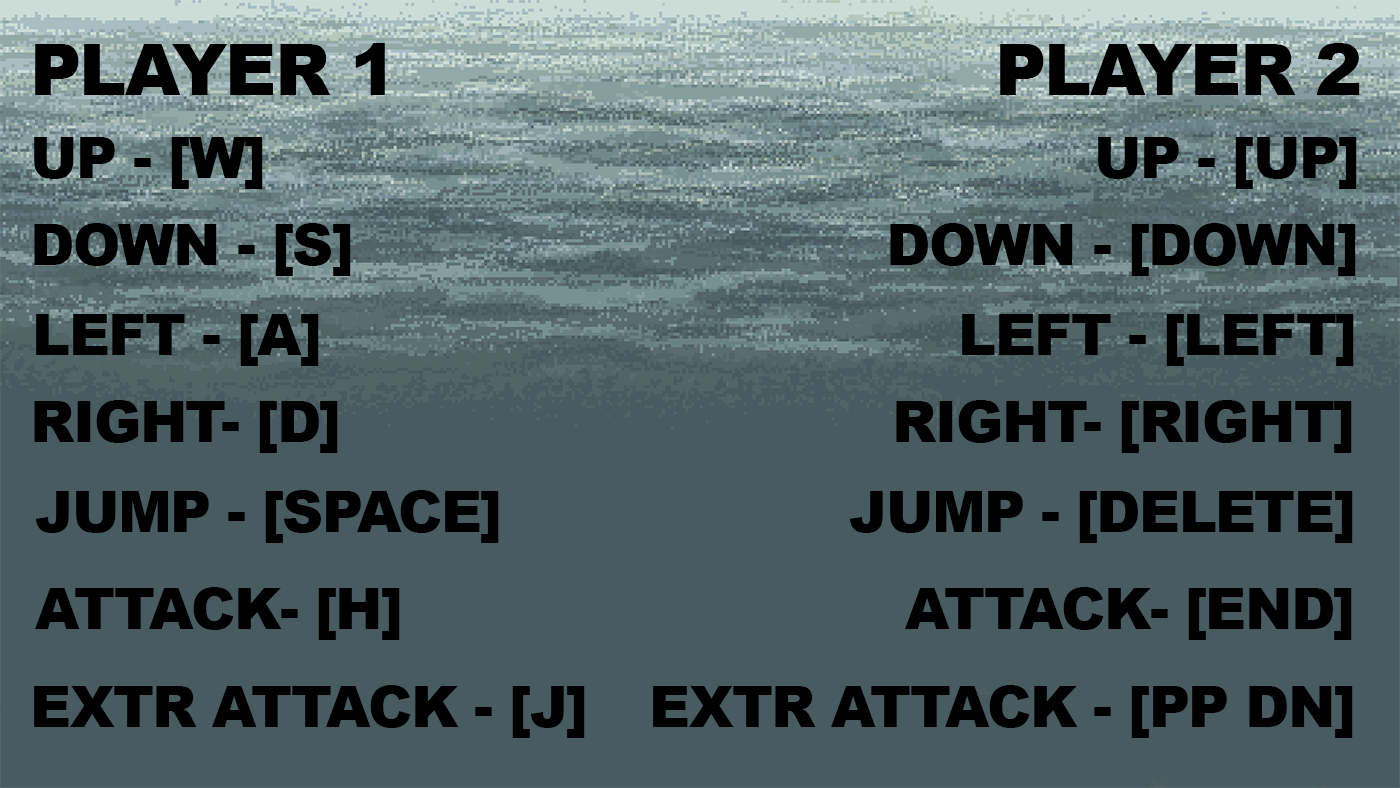
<style>
.page{position:relative;width:1400px;height:788px;background:#485b60}
.page>*{position:absolute;margin:0}
.t1{font:70.9px "Arial-Black";letter-spacing:-0.025em;color:#000000}
.t2{font:56.7px "Arial-Black";letter-spacing:-0.025em;color:#000000}
</style>
<div class="page">
<p class="t1" style="left:35px;top:43px;width:350px;height:52px">PLAYER 1</p>
<p class="t1" style="left:1000px;top:43px;width:360px;height:52px">PLAYER 2</p>
<p class="t2" style="left:34px;top:137px;width:229px;height:52px">UP - [W]</p>
<p class="t2" style="left:1098px;top:137px;width:259px;height:52px">UP - [UP]</p>
<p class="t2" style="left:34px;top:223px;width:317px;height:53px">DOWN - [S]</p>
<p class="t2" style="left:890px;top:223px;width:466px;height:53px">DOWN - [DOWN]</p>
<p class="t2" style="left:36px;top:314px;width:283px;height:52px">LEFT - [A]</p>
<p class="t2" style="left:962px;top:314px;width:392px;height:52px">LEFT - [LEFT]</p>
<p class="t2" style="left:34px;top:400px;width:304px;height:53px">RIGHT- [D]</p>
<p class="t2" style="left:896px;top:400px;width:456px;height:53px">RIGHT- [RIGHT]</p>
<p class="t2" style="left:36px;top:490px;width:463px;height:53px">JUMP - [SPACE]</p>
<p class="t2" style="left:850px;top:491px;width:503px;height:52px">JUMP - [DELETE]</p>
<p class="t2" style="left:35px;top:587px;width:365px;height:53px">ATTACK- [H]</p>
<p class="t2" style="left:905px;top:587px;width:447px;height:53px">ATTACK- [END]</p>
<p class="t2" style="left:34px;top:685px;width:551px;height:53px">EXTR ATTACK - [J]</p>
<p class="t2" style="left:653px;top:685px;width:700px;height:53px">EXTR ATTACK - [PP DN]</p>
</div>
